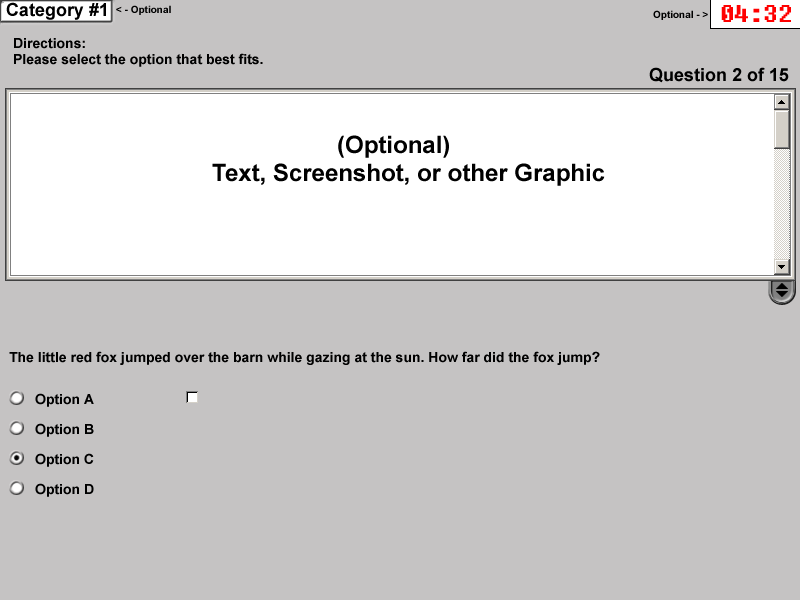
<style>
.page{position:relative;width:800px;height:600px;background:#c5c3c3}
.page>*{position:absolute;margin:0}
.t1{font:10px "Arial-BoldMT";color:#000000}
.t2{font:24px "Fixedsys";color:#ff0000}
.t3{font:14px/7.1px "Arial-BoldMT";color:#000000}
.t4{font:18px "Arial-BoldMT";color:#000000}
.t5{font:24px "Arial-BoldMT";color:#000000}
.t6{font:14px "Arial-BoldMT";color:#000000}
</style>
<div class="page">
<p class="t1" style="left:116px;top:5px;width:55px;height:10px">&lt; - Optional</p>
<p class="t2" style="left:721px;top:5px;width:70px;height:17px">04:32</p>
<p class="t1" style="left:653px;top:10px;width:55px;height:10px">Optional - &gt;</p>
<p class="t3" style="left:14px;top:38px;width:249px;height:29px">Directions: <br><br>Please select the option that best fits.</p>
<p class="t4" style="left:649px;top:67px;width:140px;height:16px">Question 2 of 15</p>
<p class="t5" style="left:338px;top:135px;width:111px;height:23px">(Optional)</p>
<p class="t5" style="left:212px;top:163px;width:393px;height:23px">Text, Screenshot, or other Graphic</p>
<p class="t6" style="left:9px;top:351px;width:591px;height:14px">The little red fox jumped over the barn while gazing at the sun. How far did the fox jump?</p>
</div>
